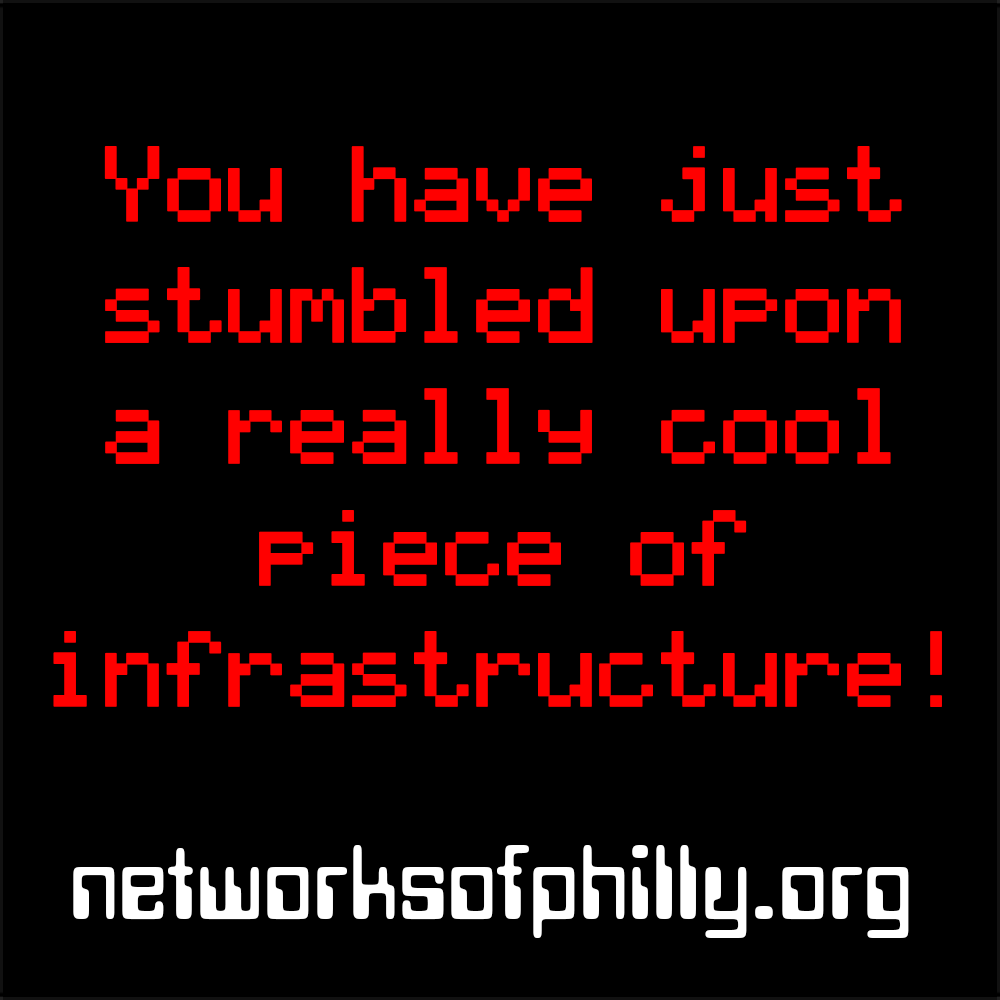
<style>
.page{position:relative;width:1000px;height:1000px;background:#000000}
.page>*{position:absolute;margin:0}
.t1{font:101px "LCDSolid";color:#ff0000}
.t2{font:111.1px "DataSeventyPlain";color:#ffffff}
</style>
<div class="page">
<p class="t1" style="left:53px;top:146px;width:889px;height:561px;text-align:center">You have just stumbled upon <br>a really cool piece of     infrastructure!</p>
<p class="t2" style="left:73px;top:845px;width:836px;height:93px">networksofphilly.org</p>
</div>
